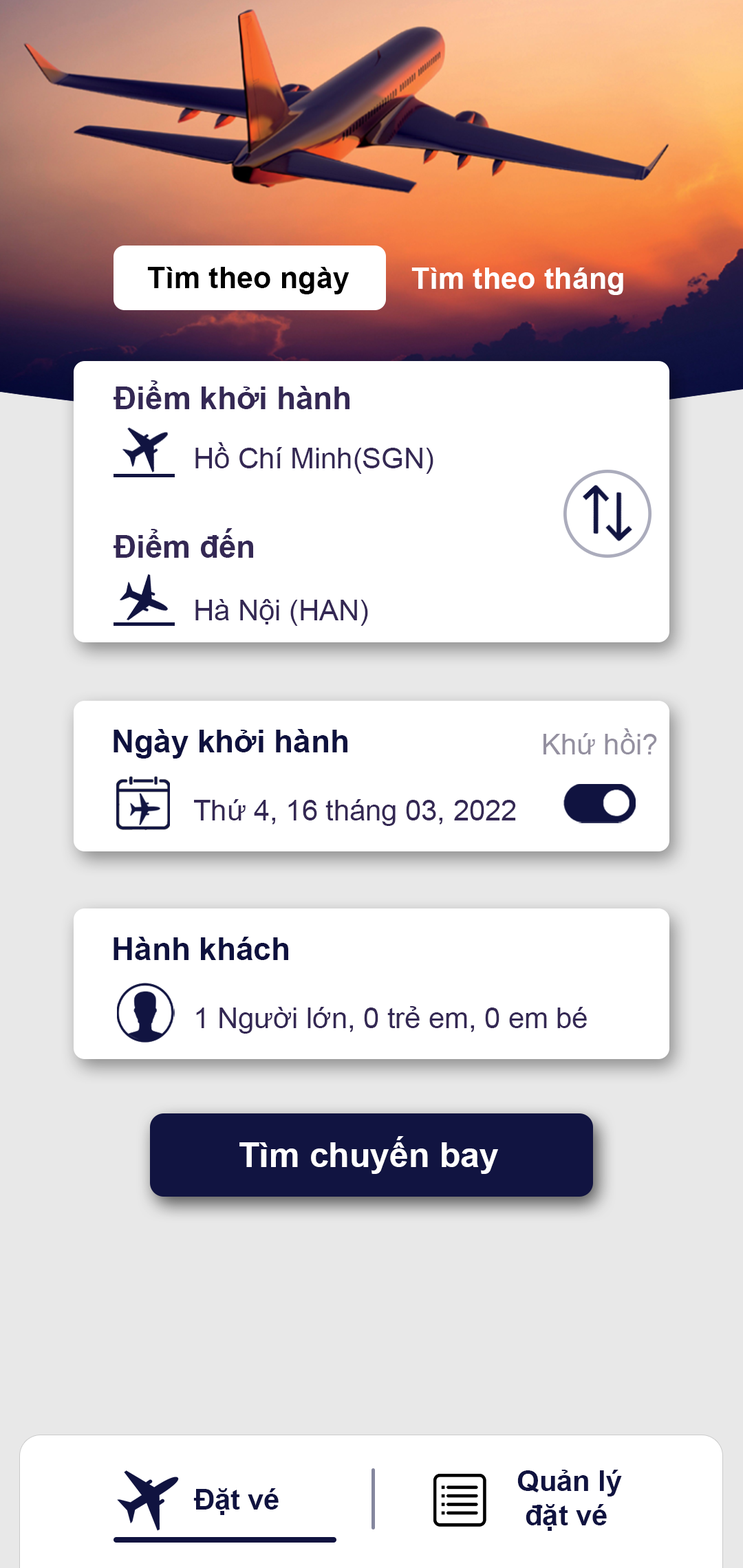
<style>
.page{position:relative;width:743px;height:1568px;background:#ffffff}
.page>*{position:absolute;margin:0}
.t1{font:29.8px "Arial-BoldMT";color:#000000}
.t2{font:29.8px "Arial-BoldMT";color:#ffffff}
.t3{font:31.5px "Arial-BoldMT";color:#342854}
.t4{font:28.7px "ArialMT";color:#342854}
.t5{font:31.5px "Arial-BoldMT";color:#0e113e}
.t6{font:28.7px "ArialMT";color:#9490a0}
.t7{font:34.4px "Arial-BoldMT";color:#ffffff}
.t8{font:28.7px "Arial-BoldMT";color:#101340}
</style>
<div class="page">
<p class="t1" style="left:147px;top:267px;width:202px;height:27px">Tìm theo ngày</p>
<p class="t2" style="left:411px;top:268px;width:212px;height:27px">Tìm theo tháng</p>
<p class="t3" style="left:113px;top:380px;width:236px;height:29px">Điểm khởi hành</p>
<p class="t4" style="left:195px;top:442px;width:238px;height:32px">Hồ Chí Minh(SGN)</p>
<p class="t3" style="left:113px;top:528px;width:140px;height:30px">Điểm đến</p>
<p class="t4" style="left:195px;top:599px;width:173px;height:27px">Hà Nội (HAN)</p>
<p class="t5" style="left:113px;top:729px;width:234px;height:30px">Ngày khởi hành</p>
<p class="t6" style="left:543px;top:728px;width:114px;height:26px">Khứ hồi?</p>
<p class="t4" style="left:194px;top:799px;width:322px;height:27px">Thứ 4, 16 tháng 03, 2022</p>
<p class="t5" style="left:113px;top:937px;width:175px;height:23px">Hành khách</p>
<p class="t4" style="left:196px;top:1006px;width:391px;height:28px">1 Người lớn, 0 trẻ em, 0 em bé</p>
<p class="t7" style="left:239px;top:1136px;width:259px;height:38px">Tìm chuyến bay</p>
<p class="t8" style="left:517px;top:1470px;width:105px;height:61px">Quản lý<br> đặt vé</p>
<p class="t8" style="left:193px;top:1488px;width:86px;height:27px">Đặt vé</p>
</div>
